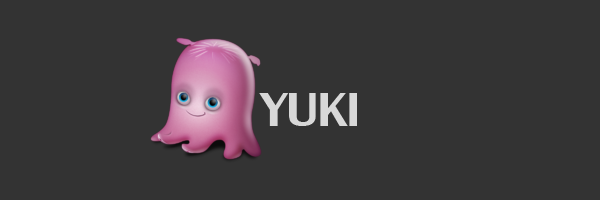
<style>
.page{position:relative;width:600px;height:200px;background:#333333}
.page>*{position:absolute;margin:0}
.t1{font:72px "LilyUPC";color:#d8d8d8}
</style>
<div class="page">
<p class="t1" style="left:259px;top:93px;width:98px;height:33px">YUKI</p>
</div>
